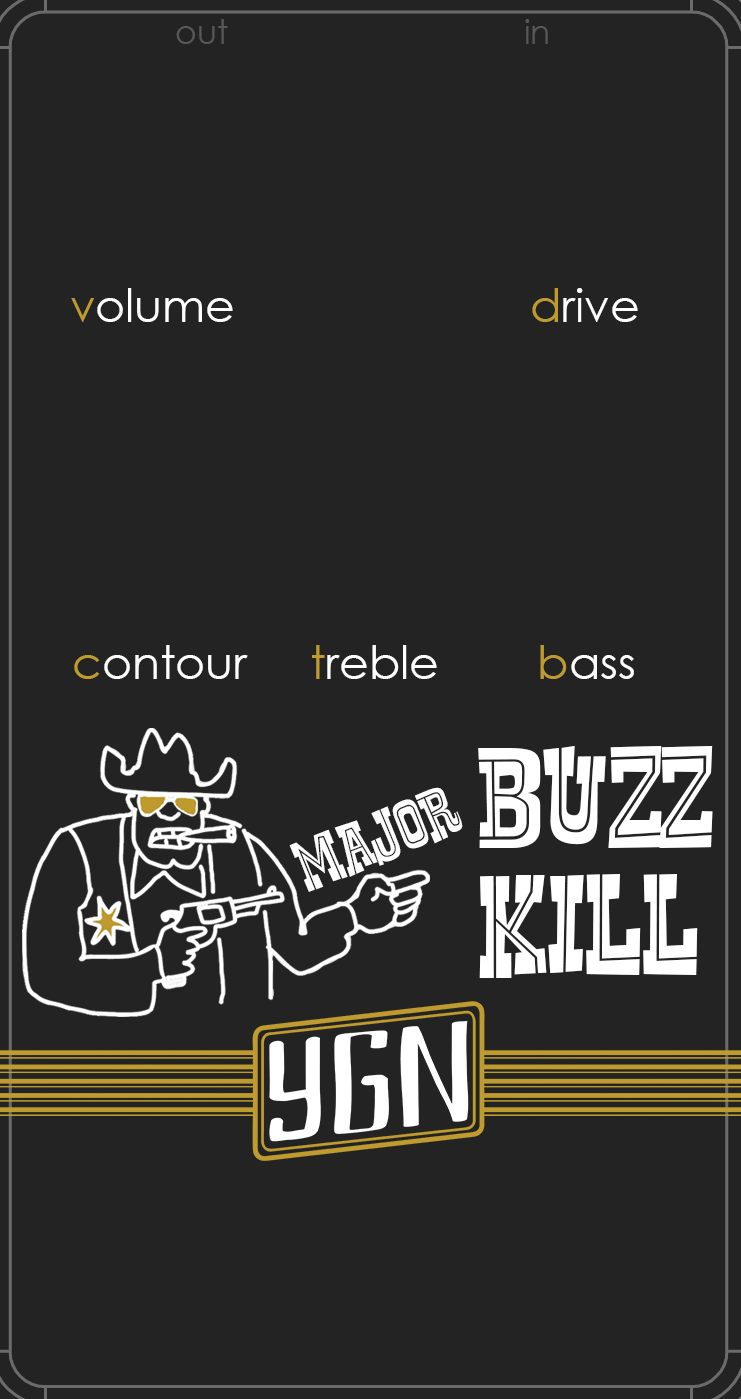
<style>
.page{position:relative;width:741px;height:1399px;background:#232323}
.page>*{position:absolute;margin:0}
.t1{font:33.3px "CenturyGothic";color:#585858}
.t2{font:45.8px "CenturyGothic";color:#ffffff}
.t3{font:45.8px "CenturyGothic";color:#bf9b2f}
.t4{font:141.7px/129.9px "RustlerFancy";color:#ffffff}
.t5{font:70.9px "RustlerFancy";color:#ffffff}
</style>
<div class="page">
<p class="t1" style="left:176px;top:19px;width:372px;height:25px">out                                in</p>
<p class="t2" style="left:71px;top:288px;width:162px;height:34px"><span class="t3">v</span>olume</p>
<p class="t2" style="left:532px;top:288px;width:106px;height:34px"><span class="t3">d</span>rive</p>
<p class="t2" style="left:74px;top:645px;width:174px;height:34px"><span class="t3">c</span>ontour</p>
<p class="t2" style="left:312px;top:645px;width:125px;height:34px"><span class="t3">t</span>reble</p>
<p class="t2" style="left:540px;top:645px;width:94px;height:34px"><span class="t3">b</span>ass</p>
<p class="t4" style="left:478px;top:746px;width:235px;height:232px">BUZZ<br>KILL</p>
<p class="t5" style="left:289px;top:787px;width:174px;height:105px;rotate:-22deg">Major</p>
</div>
